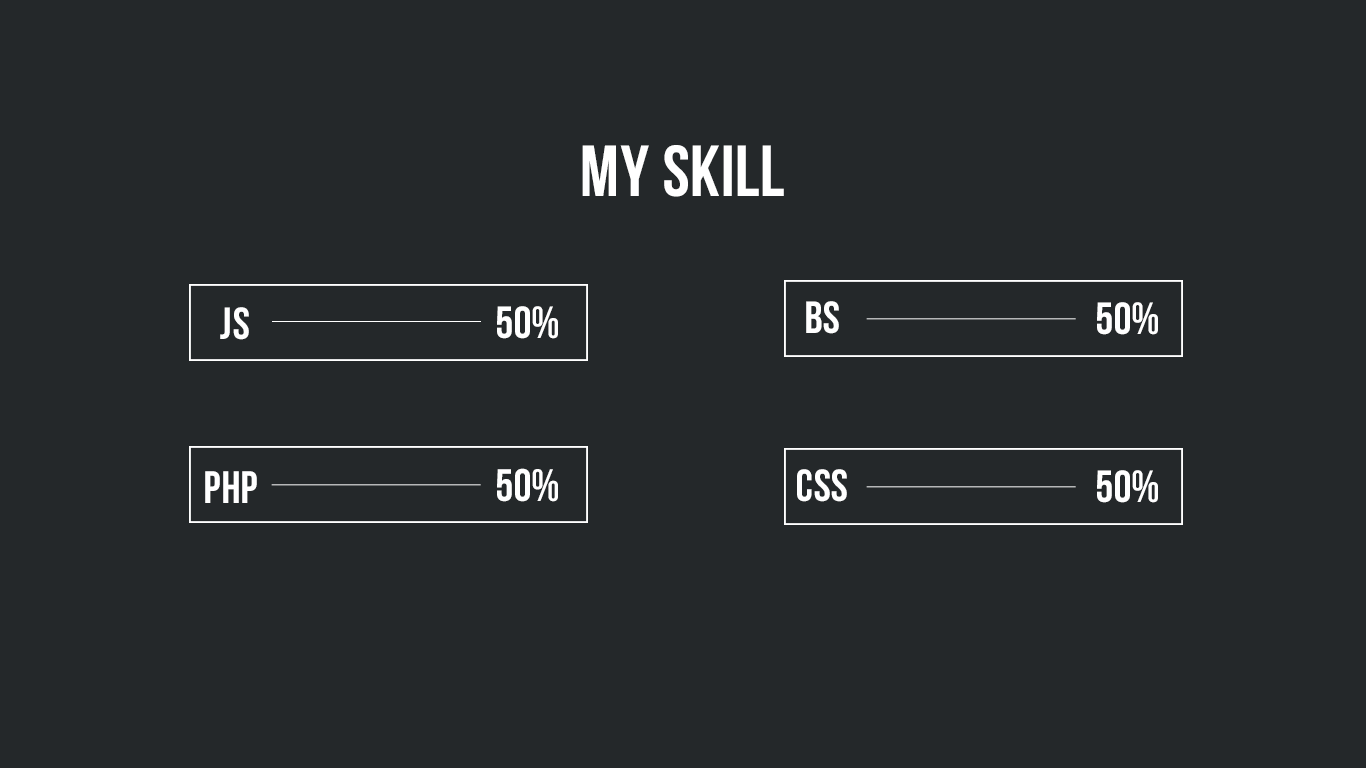
<style>
.page{position:relative;width:1366px;height:768px;background:#24282a}
.page>*{position:absolute;margin:0}
.t1{font:72px "AA-BebasNeue";letter-spacing:0.025em;color:#ffffff}
.t2{font:45px "AA-BebasNeue";letter-spacing:0.025em;color:#ffffff}
.t3{font:45.4px "AA-BebasNeue";letter-spacing:0.025em;color:#ffffff}
</style>
<div class="page">
<p class="t1" style="left:582px;top:145px;width:202px;height:52px">My skill</p>
<p class="t2" style="left:806px;top:301px;width:33px;height:33px">BS</p>
<p class="t2" style="left:1097px;top:302px;width:61px;height:33px">50%</p>
<p class="t2" style="left:220px;top:307px;width:29px;height:33px">js</p>
<p class="t2" style="left:497px;top:306px;width:61px;height:33px">50%</p>
<p class="t3" style="left:205px;top:471px;width:52px;height:32px">php</p>
<p class="t3" style="left:497px;top:468px;width:61px;height:34px">50%</p>
<p class="t2" style="left:797px;top:469px;width:50px;height:33px">css</p>
<p class="t2" style="left:1097px;top:470px;width:61px;height:33px">50%</p>
</div>
